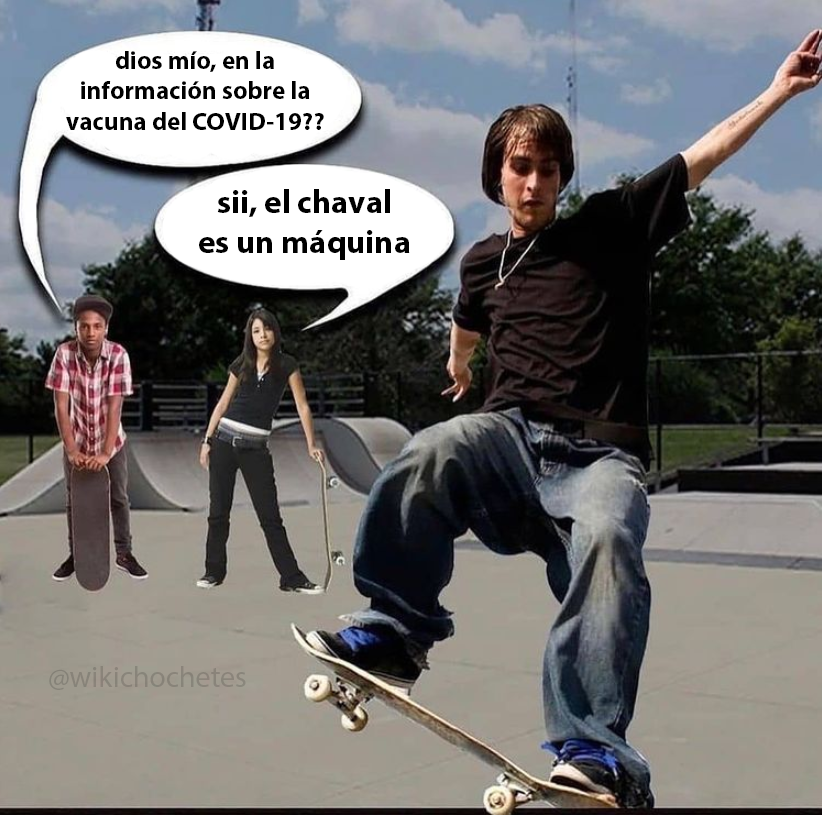
<style>
.page{position:relative;width:822px;height:815px}
.page>*{position:absolute;margin:0}
.t1{font:25.3px "MyriadPro-Bold";color:#000000}
.t2{font:32.9px "MyriadPro-Bold";color:#000000}
.t3{font:29.7px "MyriadPro-Regular";color:#89847a}
</style>
<div class="page">
<p class="t1" style="left:66px;top:51px;width:258px;height:79px;text-align:center">dios mío, en la<br>información sobre la<br>vacuna del COVID-19??</p>
<p class="t2" style="left:199px;top:189px;width:211px;height:71px;text-align:center">sii, el chaval<br>es un máquina</p>
<p class="t3" style="left:49px;top:666px;width:197px;height:24px">@wikichochetes</p>
</div>
